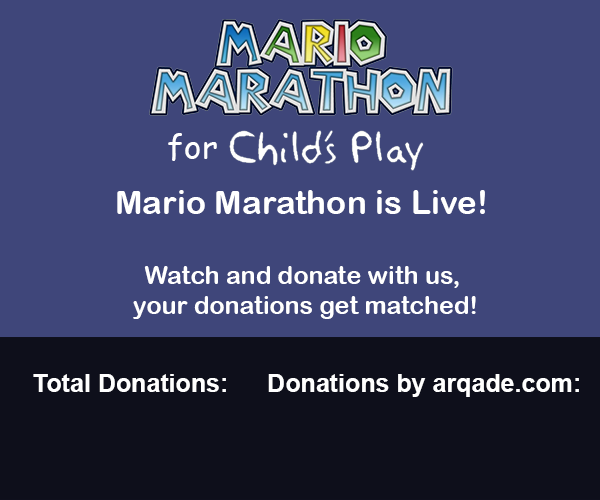
<style>
.page{position:relative;width:600px;height:500px;background:#3f467a}
.page>*{position:absolute;margin:0}
.t1{font:33.3px "ComicSansMS";color:#ffffff}
.t2{font:25px "ArialRoundedMTBold";color:#ffffff}
.t3{font:33.3px "ArialRoundedMTBold";color:#ffffff}
.t4{font:25px "Arial-BoldMT";color:#ffffff}
</style>
<div class="page">
<p class="t1" style="left:168px;top:133px;width:49px;height:28px">for</p>
<p class="t2" style="left:117px;top:190px;width:368px;height:129px;text-align:center"><span class="t3">Mario Marathon is Live! <br><br></span>Watch and donate with us, <br>your donations get matched!</p>
<p class="t4" style="left:33px;top:374px;width:193px;height:18px">Total Donations:</p>
<p class="t4" style="left:268px;top:374px;width:311px;height:23px">Donations by arqade.com:</p>
</div>
